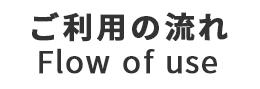
<style>
.page{position:relative;width:260px;height:89px;background:#ffffff}
.page>*{position:absolute;margin:0}
.t1{font:30px "SourceHanSansJP-Bold";letter-spacing:0.1em;color:#333333;font-weight:bold}
.t2{font:30px "SourceHanSansJP-Regular";letter-spacing:0.1em;color:#333333;font-weight:bold}
</style>
<div class="page">
<p class="t1" style="left:32px;top:12px;width:196px;height:30px">ご利用の流れ</p>
<p class="t2" style="left:39px;top:48px;width:178px;height:26px">Flow of use</p>
</div>
